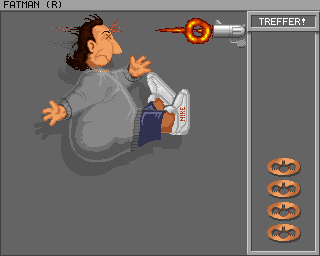
<style>
.page{position:relative;width:320px;height:256px;background:#646464}
.page>*{position:absolute;margin:0}
.t1{font:8px "Terminal";color:#000000}
.t2{font:9px "Terminal";color:#ffffff}
</style>
<div class="page">
<p class="t1" style="left:4px;top:1px;width:57px;height:7px">FATMAN (R)</p>
<p class="t2" style="left:259px;top:18px;width:46px;height:7px">TREFFER!</p>
</div>
